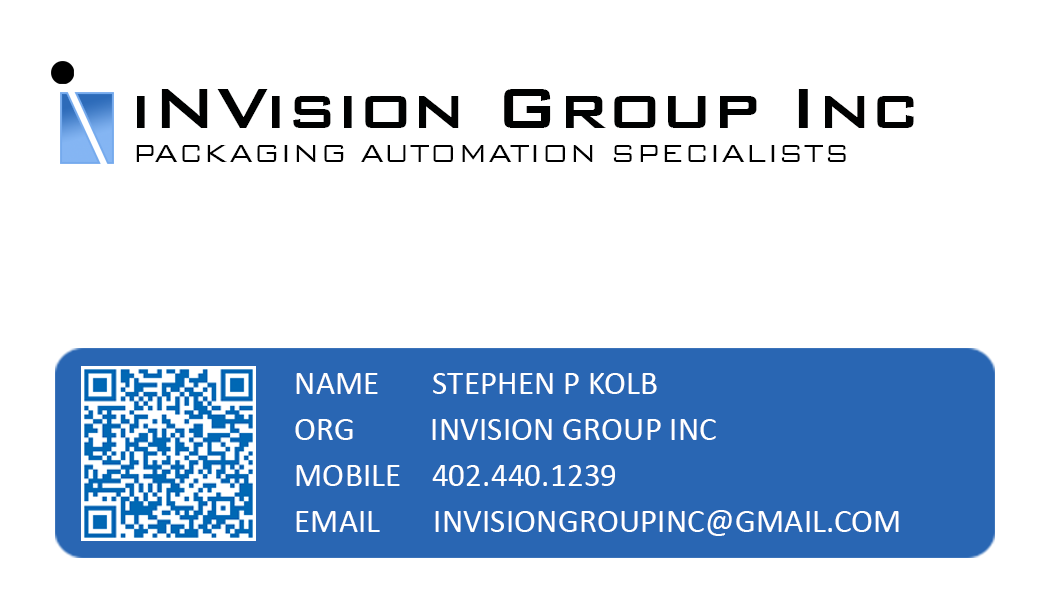
<style>
.page{position:relative;width:1050px;height:600px;background:#ffffff}
.page>*{position:absolute;margin:0}
.t1{font:75px "BankGothicBT-Medium";color:#000101}
.t2{font:33.3px "BankGothicBT-Light";color:#000000}
.t3{font:33.3px/45.8px "Calibri";color:#ffffff}
</style>
<div class="page">
<p class="t1" style="left:137px;top:89px;width:777px;height:39px">iNVision Group Inc</p>
<p class="t2" style="left:136px;top:145px;width:710px;height:17px">PACKAGING AUTOMATION SPECIALISTS</p>
<p class="t3" style="left:295px;top:373px;width:604px;height:163px">NAME       STEPHEN P KOLB<br>ORG          INVISION GROUP INC<br>MOBILE    402.440.1239<br>EMAIL       INVISIONGROUPINC@GMAIL.COM</p>
</div>
